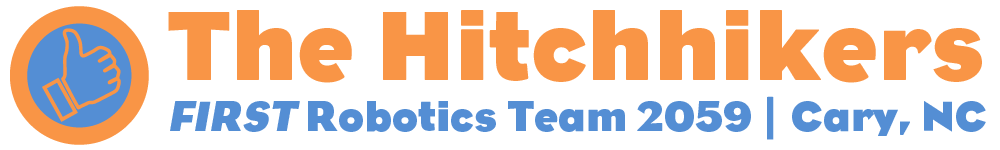
<style>
.page{position:relative;width:1000px;height:150px;background:#ffffff}
.page>*{position:absolute;margin:0}
.t1{font:42.7px "Eagle-Bold";color:#548ed4}
.t2{font:100px "Eagle-Bold";color:#f99546}
.t3{font:42.7px "Eagle-Bold";color:#548ed4;font-style:italic}
.t4{font:42.7px "Eagle-Bold";letter-spacing:0.04em;color:#548ed4}
</style>
<div class="page">
<p class="t1" style="left:168px;top:10px;width:818px;height:130px"><span class="t2">The Hitchhikers<br></span><span class="t3">FIRST </span>Robotics Team 2059 <span class="t4">|</span> Cary, NC</p>
</div>
